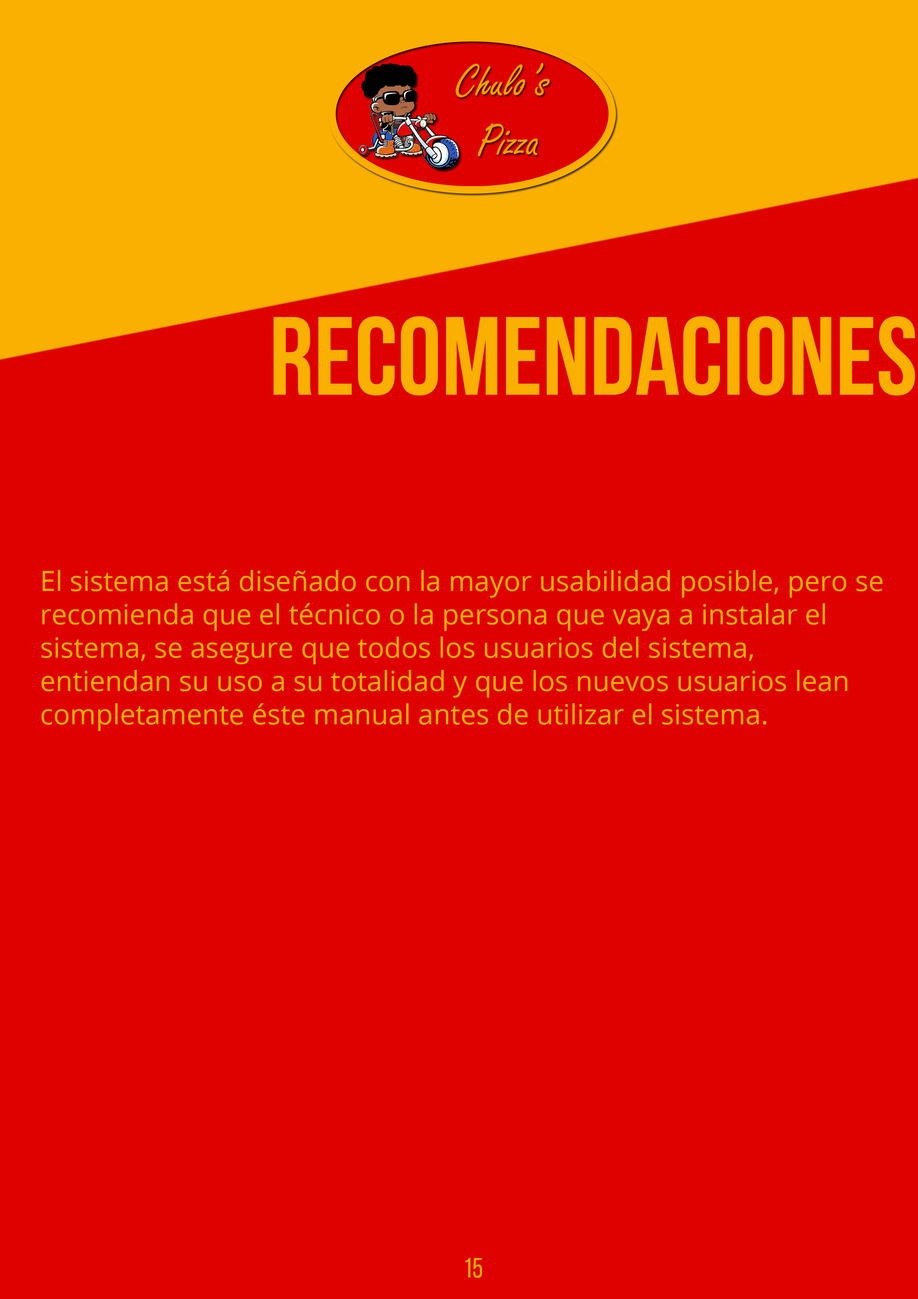
<style>
.page{position:relative;width:918px;height:1299px;background:#df0000}
.page>*{position:absolute;margin:0}
.t1{font:111.1px "BebasNeueBold";color:#fab000}
.t2{font:27.8px "OpenSans";color:#fab000}
.t3{font:27.8px "BebasNeueRegular";color:#fab000}
</style>
<div class="page">
<p class="t1" style="left:274px;top:316px;width:641px;height:79px">REcomendaciones</p>
<p class="t2" style="left:41px;top:570px;width:842px;height:161px">El sistema está diseñado con la mayor usabilidad posible, pero se recomienda que el técnico o la persona que vaya a instalar el sistema, se asegure que todos los usuarios del sistema, entiendan su uso a su totalidad y que los nuevos usuarios lean completamente éste manual antes de utilizar el sistema.</p>
<p class="t3" style="left:465px;top:1258px;width:17px;height:20px">15</p>
</div>
